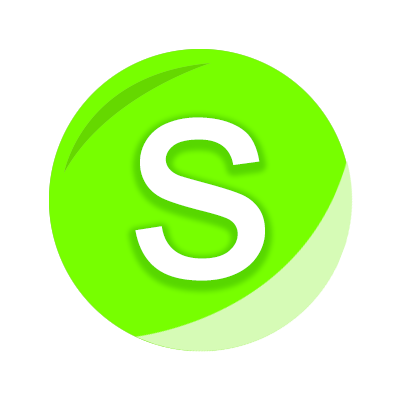
<style>
.page{position:relative;width:400px;height:400px;background:#ffffff}
.page>*{position:absolute;margin:0}
.t1{font:300px "ArialMT";color:#ffffff}
</style>
<div class="page">
<p class="t1" style="left:135px;top:117px;width:130px;height:164px">s</p>
</div>
